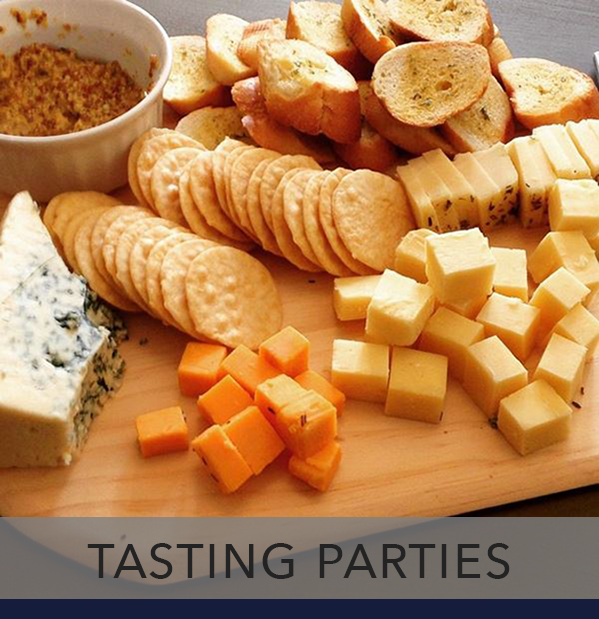
<style>
.page{position:relative;width:599px;height:619px}
.page>*{position:absolute;margin:0}
.t1{font:64px "AvenirNext-Regular";color:#232323;font-variant:small-caps}
</style>
<div class="page">
<p class="t1" style="left:87px;top:543px;width:423px;height:36px">tasting parties</p>
</div>
